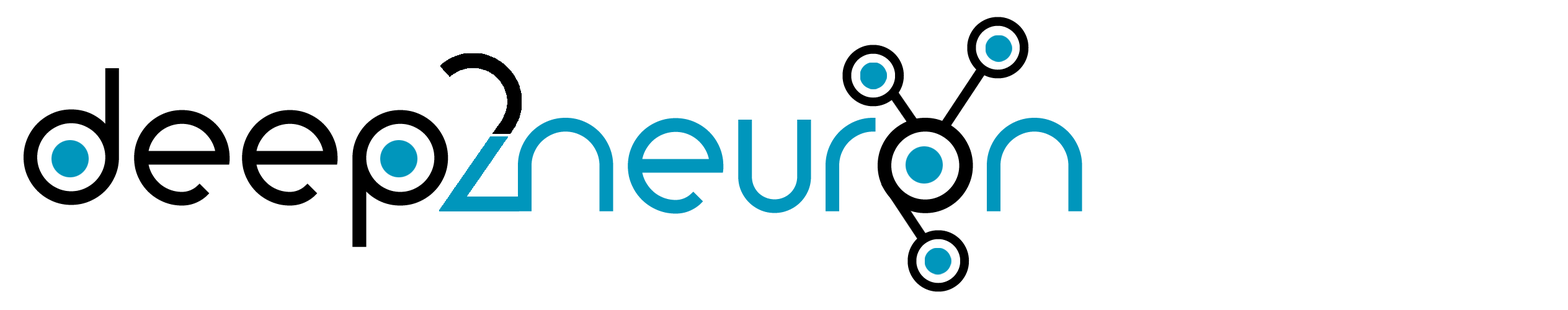
<style>
.page{position:relative;width:1568px;height:310px;background:#ffffff}
.page>*{position:absolute;margin:0}
.t1{font:111.6px "TimeBurner";color:#000000;font-weight:bold}
.t2{font:173.7px "TimeBurner";color:#000000;font-weight:bold}
.t3{font:173.7px "TimeBurner";color:#0096bc;font-weight:bold}
</style>
<div class="page">
<p class="t1" style="left:967px;top:17px;width:62px;height:62px">o</p>
<p class="t1" style="left:842px;top:45px;width:62px;height:62px">o</p>
<p class="t2" style="left:24px;top:68px;width:424px;height:179px">deep</p>
<p class="t3" style="left:518px;top:118px;width:358px;height:96px">neur</p>
<p class="t2" style="left:878px;top:118px;width:204px;height:95px">o<span class="t3">n</span></p>
<p class="t1" style="left:907px;top:230px;width:62px;height:62px">o</p>
</div>
